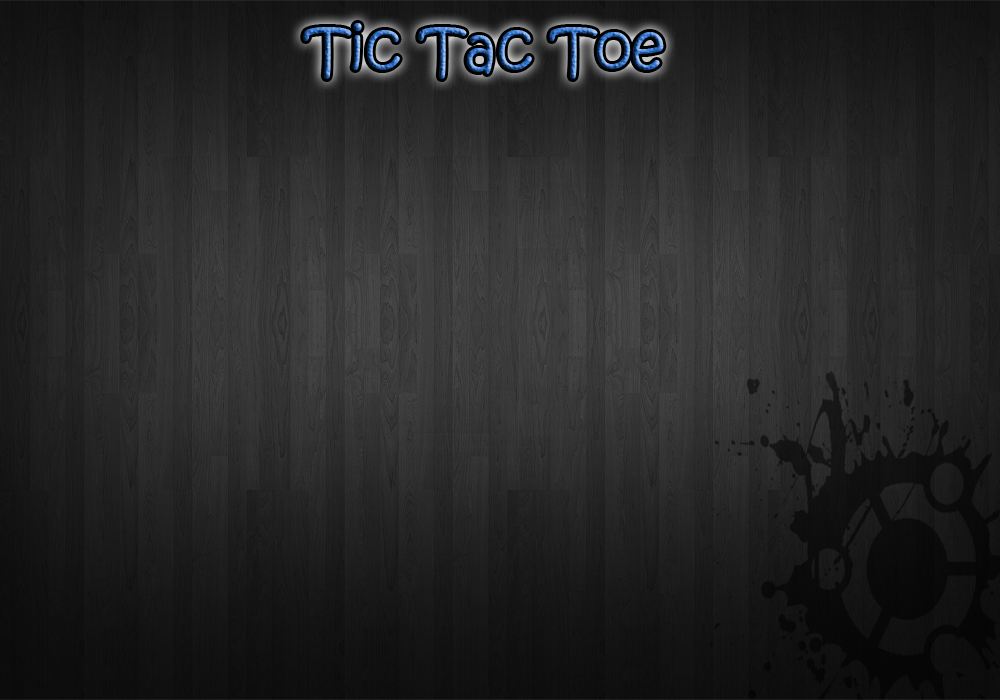
<style>
.page{position:relative;width:1000px;height:700px}
.page>*{position:absolute;margin:0}
.t1{font:60.1px "KristenITC-Regular"}
</style>
<div class="page">
<p class="t1" style="left:303px;top:23px;width:361px;height:56px">Tic Tac Toe</p>
</div>
